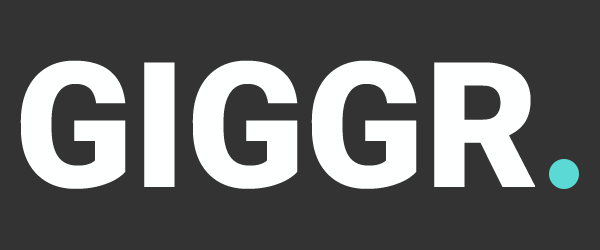
<style>
.page{position:relative;width:600px;height:250px;background:#333333}
.page>*{position:absolute;margin:0}
.t1{font:175px "Roboto-Black";color:#feffff}
</style>
<div class="page">
<p class="t1" style="left:20px;top:60px;width:515px;height:129px">GIGGR</p>
</div>
